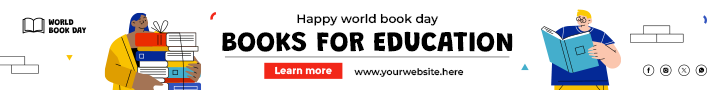
<style>
.page{position:relative;width:728px;height:90px;background:#ffffff}
.page>*{position:absolute;margin:0}
.t1{font:12.2px "Montserrat-SemiBold";color:#000000}
.t2{font:28.4px "Grandstander-ExtraBold";color:#000000}
.t3{font:10px "Montserrat-Bold";color:#ffffff}
.t4{font:9.2px "Montserrat-SemiBold";color:#000000}
</style>
<div class="page">
<p class="t1" style="left:297px;top:13px;width:142px;height:13px">Happy world book day</p>
<p class="t2" style="left:222px;top:31px;width:291px;height:21px">BOOKS FOR EDUCATION</p>
<p class="t3" style="left:275px;top:66px;width:57px;height:9px">Learn more</p>
<p class="t4" style="left:354px;top:67px;width:110px;height:10px">www.yourwebsite.here</p>
</div>
